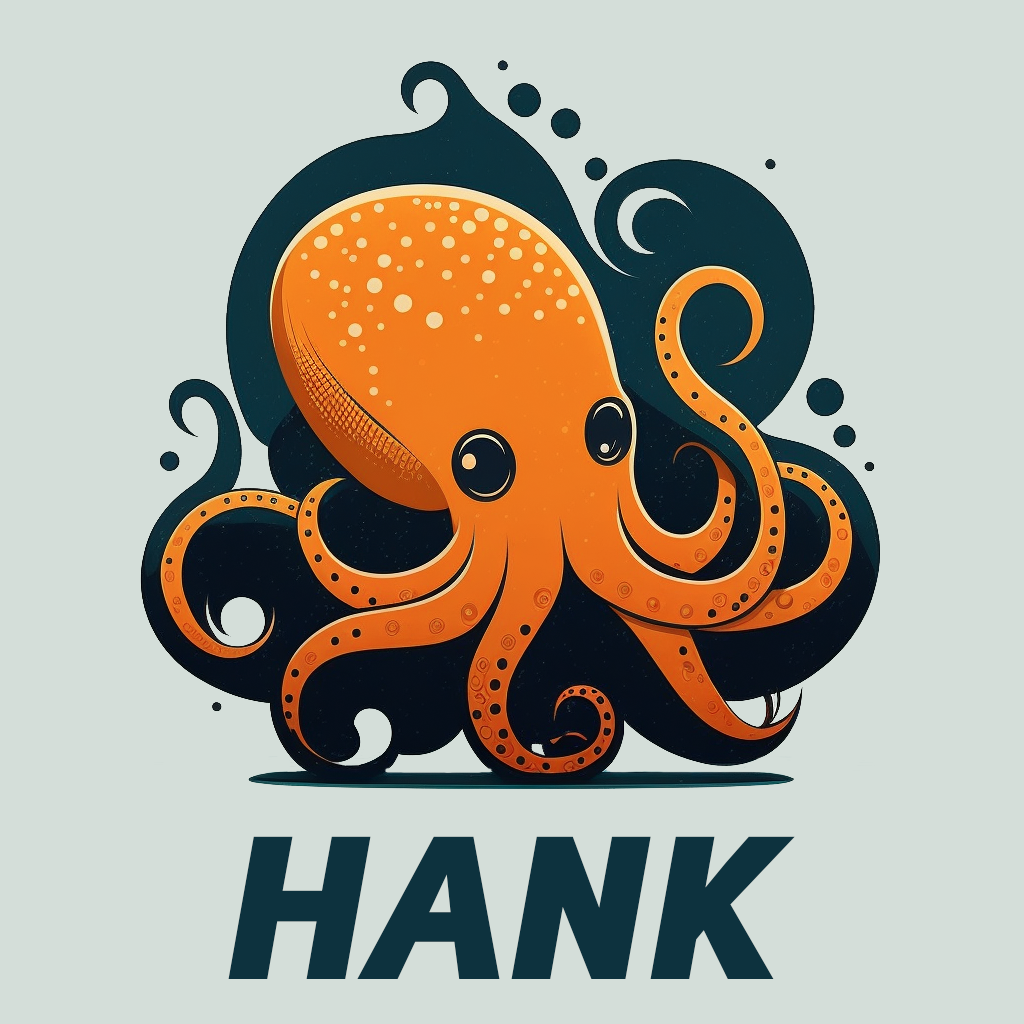
<style>
.page{position:relative;width:1024px;height:1024px;background:#d4ded9}
.page>*{position:absolute;margin:0}
.t1{font:200px "MetronicPro-BlackItalic";color:#0d323e}
</style>
<div class="page">
<p class="t1" style="left:228px;top:836px;width:567px;height:143px">HANK</p>
</div>
